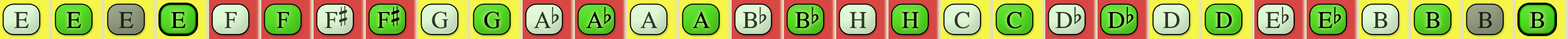
<style>
.page{position:relative;width:1568px;height:39px}
.page>*{position:absolute;margin:0}
.t1{font:24.1px "OpusChords";color:#30362e}
.t2{font:24.1px "OpusChords";color:#000000}
.t3{font:24.1px "OpusChords";color:#1f211b}
.t4{font:24.1px "OpusChords";color:#30352d}
.t5{font:24.1px "OpusChords";color:#2f352d}
.t6{font:24.1px "OpusChords";letter-spacing:-0.05em;color:#2f352d}
.t7{font:24.1px "OpusChords";letter-spacing:-0.05em;color:#000000}
</style>
<div class="page">
<p class="t1" style="left:14px;top:12px;width:15px;height:16px">E</p>
<p class="t2" style="left:66px;top:12px;width:15px;height:16px">E</p>
<p class="t3" style="left:119px;top:12px;width:14px;height:16px">E</p>
<p class="t2" style="left:171px;top:12px;width:14px;height:16px">E</p>
<p class="t1" style="left:224px;top:12px;width:13px;height:16px">F</p>
<p class="t2" style="left:276px;top:12px;width:13px;height:16px">F</p>
<p class="t4" style="left:325px;top:6px;width:22px;height:22px">F#</p>
<p class="t2" style="left:377px;top:6px;width:23px;height:22px">F#</p>
<p class="t5" style="left:432px;top:12px;width:16px;height:17px">G</p>
<p class="t2" style="left:484px;top:12px;width:17px;height:17px">G</p>
<p class="t6" style="left:534px;top:7px;width:25px;height:21px">Ab</p>
<p class="t7" style="left:586px;top:7px;width:25px;height:21px">Ab</p>
<p class="t5" style="left:640px;top:12px;width:17px;height:16px">A</p>
<p class="t2" style="left:693px;top:12px;width:17px;height:16px">A</p>
<p class="t4" style="left:743px;top:7px;width:23px;height:21px">Bb</p>
<p class="t2" style="left:795px;top:7px;width:24px;height:21px">Bb</p>
<p class="t4" style="left:849px;top:12px;width:17px;height:16px">H</p>
<p class="t2" style="left:902px;top:12px;width:17px;height:16px">H</p>
<p class="t1" style="left:954px;top:12px;width:15px;height:17px">C</p>
<p class="t2" style="left:1007px;top:12px;width:15px;height:17px">C</p>
<p class="t5" style="left:1055px;top:7px;width:27px;height:21px">Db</p>
<p class="t2" style="left:1108px;top:7px;width:26px;height:21px">Db</p>
<p class="t5" style="left:1163px;top:12px;width:17px;height:16px">D</p>
<p class="t2" style="left:1215px;top:12px;width:17px;height:16px">D</p>
<p class="t4" style="left:1265px;top:7px;width:24px;height:21px">Eb</p>
<p class="t2" style="left:1318px;top:7px;width:23px;height:21px">Eb</p>
<p class="t4" style="left:1373px;top:12px;width:15px;height:16px">B</p>
<p class="t2" style="left:1425px;top:12px;width:15px;height:16px">B</p>
<p class="t3" style="left:1478px;top:12px;width:14px;height:16px">B</p>
<p class="t2" style="left:1530px;top:12px;width:14px;height:16px">B</p>
</div>
